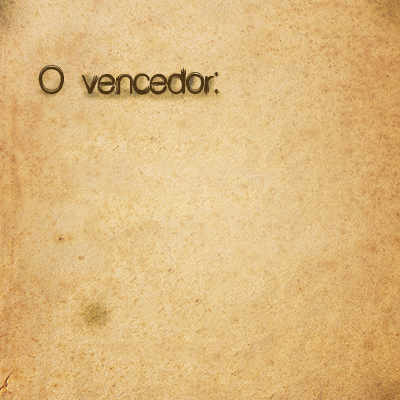
<style>
.page{position:relative;width:400px;height:400px}
.page>*{position:absolute;margin:0}
.t1{font:36px "Decibel";color:#4b3514}
</style>
<div class="page">
<p class="t1" style="left:38px;top:65px;width:181px;height:30px">O vencedor:</p>
</div>
